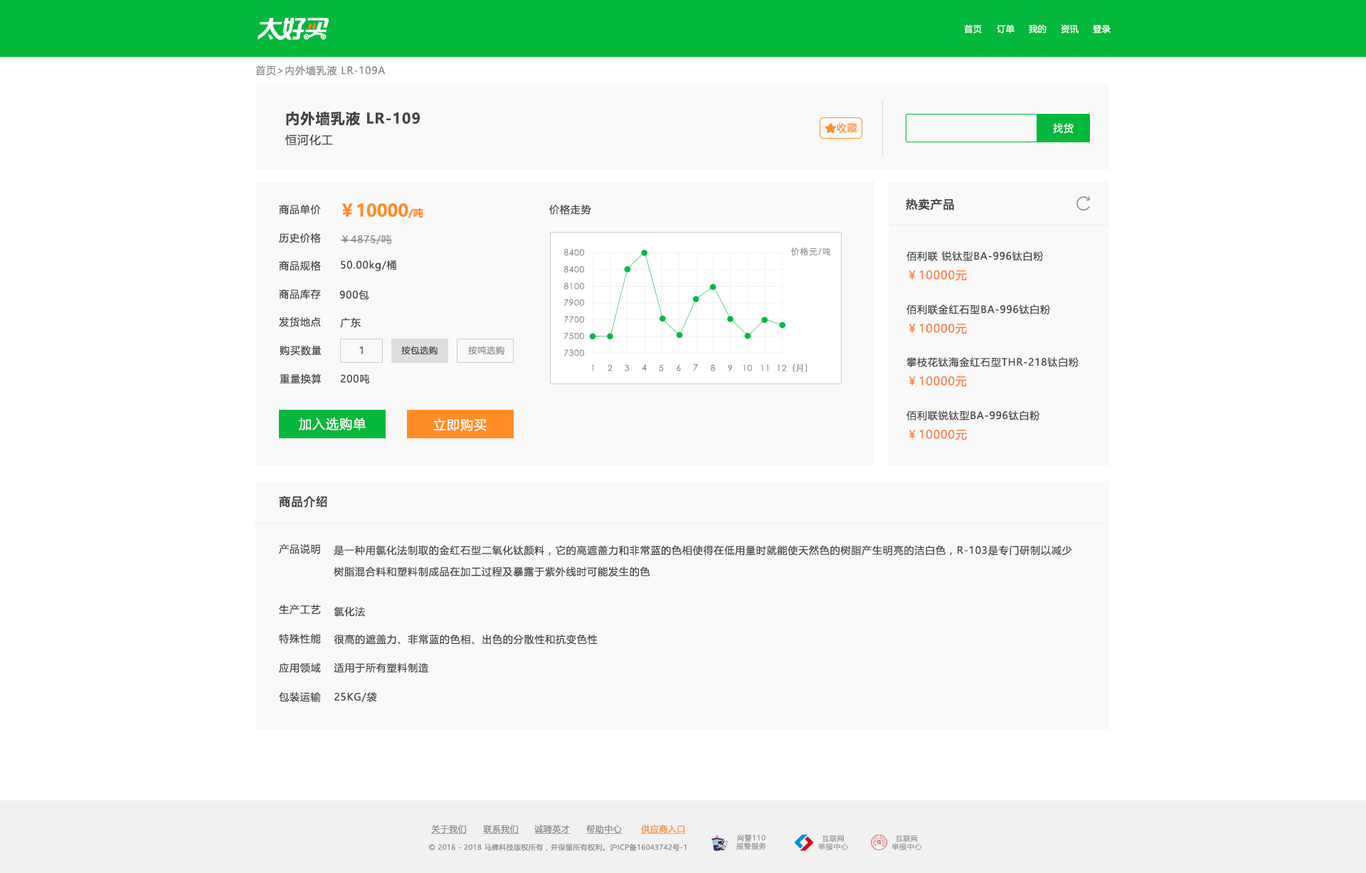
<style>
.page{position:relative;width:1366px;height:873px;background:#ffffff}
.page>*{position:absolute;margin:0}
.t1{font:8.5px "MicrosoftYaHeiUI";letter-spacing:0.04em;color:#ffffff}
.t2{font:10px "MicrosoftYaHei";letter-spacing:0.06em;color:#888888}
.t3{font:14.2px "MicrosoftYaHei-Bold";letter-spacing:0.06em;color:#444444}
.t4{font:10px "MicrosoftYaHei";letter-spacing:0.06em;color:#ff8d27}
.t5{font:10px "MicrosoftYaHei";letter-spacing:0.06em;color:#f7f7f7}
.t6{font:11.4px "MicrosoftYaHei";letter-spacing:0.06em;color:#444444}
.t7{font:10px "MicrosoftYaHei";letter-spacing:0.06em;color:#444444}
.t8{font:17.1px "MicrosoftYaHei-Bold";color:#ff8d27}
.t9{font:10px "MicrosoftYaHei-Bold";color:#ff8d27}
.t10{font:11.4px "MicrosoftYaHei";letter-spacing:0.06em;color:#444444;font-weight:bold}
.t11{font:10px "MicrosoftYaHei";letter-spacing:0.06em;color:#8c8c8c}
.t12{font:8.5px "STXihei";letter-spacing:0.06em;color:#888888}
.t13{font:11.4px "MicrosoftYaHei";letter-spacing:0.06em;color:#ff7b41}
.t14{font:8.5px "MicrosoftYaHei";letter-spacing:0.06em;color:#444444}
.t15{font:8.5px "MicrosoftYaHei";letter-spacing:0.06em;color:#8c8c8c}
.t16{font:12.8px "MicrosoftYaHei";letter-spacing:0.06em;color:#ffffff}
.t17{font:10px/21.3px "MicrosoftYaHei";letter-spacing:0.06em;color:#444444}
.t18{font:8.5px "MicrosoftYaHeiUI";letter-spacing:0.04em;color:#8c8c8c;text-decoration:underline}
.t19{font:8.5px "MicrosoftYaHeiUI";letter-spacing:0.04em;color:#ff8b25;text-decoration:underline}
.t20{font:7.1px/8.2px "MicrosoftYaHei";letter-spacing:0.06em;color:#999999}
.t21{font:7.1px "MicrosoftYaHeiUI";letter-spacing:0.04em;color:#8c8c8c}
</style>
<div class="page">
<p class="t1" style="left:964px;top:24px;width:18px;height:9px">首页</p>
<p class="t1" style="left:997px;top:24px;width:18px;height:9px">订单</p>
<p class="t1" style="left:1029px;top:24px;width:18px;height:9px">我的</p>
<p class="t1" style="left:1061px;top:24px;width:18px;height:9px">资讯</p>
<p class="t1" style="left:1093px;top:25px;width:18px;height:8px">登录</p>
<p class="t2" style="left:255px;top:65px;width:131px;height:10px">首页&gt;内外墙乳液 LR-109A</p>
<p class="t3" style="left:286px;top:111px;width:134px;height:15px">内外墙乳液 LR-109</p>
<p class="t4" style="left:837px;top:122px;width:20px;height:11px">收藏</p>
<p class="t5" style="left:1053px;top:123px;width:21px;height:11px">找货</p>
<p class="t6" style="left:285px;top:134px;width:48px;height:12px">恒河化工</p>
<p class="t7" style="left:279px;top:204px;width:42px;height:11px">商品单价</p>
<p class="t8" style="left:341px;top:203px;width:82px;height:15px">￥10000<span class="t9">/吨</span></p>
<p class="t7" style="left:549px;top:204px;width:42px;height:11px">价格走势</p>
<p class="t10" style="left:906px;top:198px;width:48px;height:13px">热卖产品</p>
<p class="t7" style="left:279px;top:233px;width:42px;height:10px">历史价格</p>
<p class="t11" style="left:340px;top:234px;width:52px;height:11px">￥4875/吨</p>
<p class="t12" style="left:563px;top:249px;width:21px;height:7px">8400</p>
<p class="t12" style="left:790px;top:248px;width:41px;height:8px">价格元/吨</p>
<p class="t7" style="left:906px;top:251px;width:138px;height:10px">佰利联 锐钛型BA-996钛白粉</p>
<p class="t7" style="left:279px;top:260px;width:42px;height:11px">商品规格</p>
<p class="t7" style="left:341px;top:260px;width:55px;height:11px">50.00kg/桶</p>
<p class="t12" style="left:563px;top:265px;width:21px;height:8px">8400</p>
<p class="t13" style="left:909px;top:270px;width:58px;height:11px">￥10000元</p>
<p class="t7" style="left:279px;top:289px;width:42px;height:11px">商品库存</p>
<p class="t7" style="left:339px;top:290px;width:30px;height:10px">900包</p>
<p class="t12" style="left:563px;top:282px;width:21px;height:8px">8100</p>
<p class="t12" style="left:564px;top:299px;width:20px;height:7px">7900</p>
<p class="t7" style="left:906px;top:305px;width:144px;height:9px">佰利联金红石型BA-996钛白粉</p>
<p class="t7" style="left:279px;top:317px;width:42px;height:10px">发货地点</p>
<p class="t7" style="left:340px;top:317px;width:21px;height:11px">广东</p>
<p class="t12" style="left:564px;top:316px;width:20px;height:7px">7700</p>
<p class="t13" style="left:909px;top:323px;width:58px;height:11px">￥10000元</p>
<p class="t12" style="left:564px;top:332px;width:20px;height:7px">7500</p>
<p class="t7" style="left:280px;top:345px;width:42px;height:11px">购买数量</p>
<p class="t7" style="left:359px;top:346px;width:4px;height:8px">1</p>
<p class="t14" style="left:401px;top:346px;width:37px;height:9px">按包选购</p>
<p class="t15" style="left:468px;top:346px;width:36px;height:9px">按吨选购</p>
<p class="t12" style="left:564px;top:349px;width:20px;height:7px">7300</p>
<p class="t12" style="left:591px;top:364px;width:3px;height:7px">1</p>
<p class="t12" style="left:608px;top:364px;width:5px;height:7px">2</p>
<p class="t12" style="left:625px;top:364px;width:5px;height:7px">3</p>
<p class="t12" style="left:642px;top:364px;width:5px;height:7px">4</p>
<p class="t12" style="left:659px;top:364px;width:5px;height:7px">5</p>
<p class="t12" style="left:677px;top:364px;width:4px;height:7px">6</p>
<p class="t12" style="left:694px;top:364px;width:4px;height:7px">7</p>
<p class="t12" style="left:711px;top:364px;width:4px;height:7px">8</p>
<p class="t12" style="left:728px;top:364px;width:4px;height:7px">9</p>
<p class="t12" style="left:743px;top:364px;width:9px;height:7px">10</p>
<p class="t12" style="left:761px;top:364px;width:7px;height:7px">11</p>
<p class="t12" style="left:778px;top:364px;width:9px;height:7px">12</p>
<p class="t12" style="left:793px;top:364px;width:14px;height:8px">(月)</p>
<p class="t7" style="left:906px;top:357px;width:173px;height:10px">攀枝花钛海金红石型THR-218钛白粉</p>
<p class="t7" style="left:280px;top:374px;width:42px;height:10px">重量换算</p>
<p class="t7" style="left:340px;top:374px;width:30px;height:9px">200吨</p>
<p class="t13" style="left:909px;top:376px;width:58px;height:11px">￥10000元</p>
<p class="t7" style="left:906px;top:411px;width:134px;height:9px">佰利联锐钛型BA-996钛白粉</p>
<p class="t16" style="left:299px;top:418px;width:67px;height:12px">加入选购单</p>
<p class="t16" style="left:433px;top:418px;width:54px;height:13px">立即购买</p>
<p class="t13" style="left:909px;top:429px;width:58px;height:11px">￥10000元</p>
<p class="t10" style="left:279px;top:495px;width:48px;height:13px">商品介绍</p>
<p class="t7" style="left:279px;top:544px;width:41px;height:10px">产品说明</p>
<p class="t17" style="left:334px;top:545px;width:738px;height:32px">是一种用氯化法制取的金红石型二氧化钛颜料，它的高遮盖力和非常蓝的色相使得在低用量时就能使天然色的树脂产生明亮的洁白色，R-103是专门研制以减少树脂混合料和塑料制成品在加工过程及暴露于紫外线时可能发生的色</p>
<p class="t7" style="left:279px;top:604px;width:42px;height:11px">生产工艺</p>
<p class="t7" style="left:334px;top:606px;width:31px;height:11px">氯化法</p>
<p class="t7" style="left:279px;top:633px;width:42px;height:11px">特殊性能</p>
<p class="t7" style="left:334px;top:634px;width:264px;height:11px">很高的遮盖力、非常蓝的色相、出色的分散性和抗变色性</p>
<p class="t7" style="left:279px;top:662px;width:42px;height:11px">应用领域</p>
<p class="t7" style="left:334px;top:662px;width:94px;height:11px">适用于所有塑料制造</p>
<p class="t7" style="left:279px;top:692px;width:42px;height:10px">包装运输</p>
<p class="t7" style="left:334px;top:692px;width:43px;height:10px">25KG/袋</p>
<p class="t18" style="left:431px;top:825px;width:36px;height:9px">关于我们</p>
<p class="t18" style="left:483px;top:825px;width:36px;height:9px">联系我们</p>
<p class="t18" style="left:534px;top:825px;width:37px;height:9px">诚聘英才</p>
<p class="t18" style="left:586px;top:825px;width:37px;height:9px">帮助中心</p>
<p class="t19" style="left:641px;top:825px;width:45px;height:9px">供应商入口</p>
<p class="t20" style="left:736px;top:834px;width:30px;height:16px;text-align:center">网警110<br>报警服务</p>
<p class="t21" style="left:429px;top:843px;width:258px;height:8px">© 2016 - 2018 马蜂科技版权所有，并保留所有权利。沪ICP备16043742号-1</p>
<p class="t20" style="left:818px;top:835px;width:30px;height:15px;text-align:center">互联网<br>举报中心</p>
<p class="t20" style="left:891px;top:835px;width:31px;height:15px;text-align:center">互联网<br>举报中心</p>
</div>
